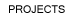
<style>
.page{position:relative;width:72px;height:16px;background:#ffffff}
.page>*{position:absolute;margin:0}
.t1{font:17px "Kartika";color:#000000}
</style>
<div class="page">
<p class="t1" style="left:9px;top:5px;width:56px;height:8px">PROJECTS</p>
</div>
